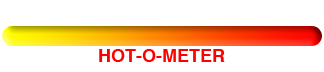
<style>
.page{position:relative;width:324px;height:72px;background:#ffffff}
.page>*{position:absolute;margin:0}
.t1{font:18px "Helvetica-Bold";color:#ff0000}
</style>
<div class="page">
<p class="t1" style="left:99px;top:49px;width:126px;height:13px">HOT-O-METER</p>
</div>
